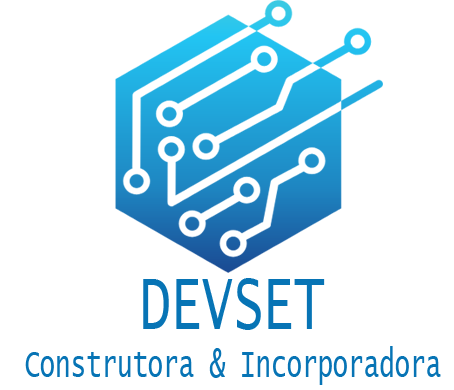
<style>
.page{position:relative;width:454px;height:390px;background:#ffffff}
.page>*{position:absolute;margin:0}
.t1{font:39.9px "LucidaConsole";color:#0774b5;scale:0.64 1}
.t2{font:79.8px "LucidaConsole";color:#0774b5;scale:0.64 1}
</style>
<div class="page">
<p class="t1" style="left:25px;top:278px;width:416px;height:107px;text-align:center"><span class="t2">DEVSET<br></span>Construtora &amp; Incorporadora</p>
</div>
